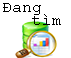
<style>
.page{position:relative;width:71px;height:58px;background:#ffffff}
.page>*{position:absolute;margin:0}
.t1{font:12px/13.3px "CourierNewPSMT";color:#000000}
</style>
<div class="page">
<p class="t1" style="left:3px;top:3px;width:58px;height:22px">Đang<br>   tìm</p>
</div>
